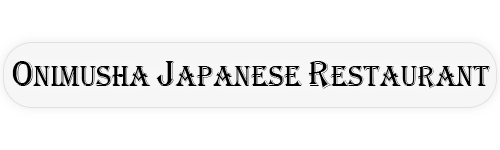
<style>
.page{position:relative;width:500px;height:150px;background:#ffffff}
.page>*{position:absolute;margin:0}
.t1{font:30.2px "Algerian";color:#000000;scale:0.93 1}
.t2{font:38.1px "Algerian";color:#000000;scale:0.93 1}
</style>
<div class="page">
<p class="t1" style="left:12px;top:61px;width:479px;height:28px"><span class="t2">O</span>nimusha <span class="t2">J</span>apanese <span class="t2">R</span>estaurant</p>
</div>
